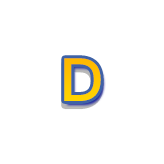
<style>
.page{position:relative;width:164px;height:164px;background:#ffffff}
.page>*{position:absolute;margin:0}
.t1{font:59.8px "PingFangHK-Semibold";color:#ffc600;text-transform:uppercase}
</style>
<div class="page">
<p class="t1" style="left:64px;top:58px;width:37px;height:43px">d</p>
</div>
